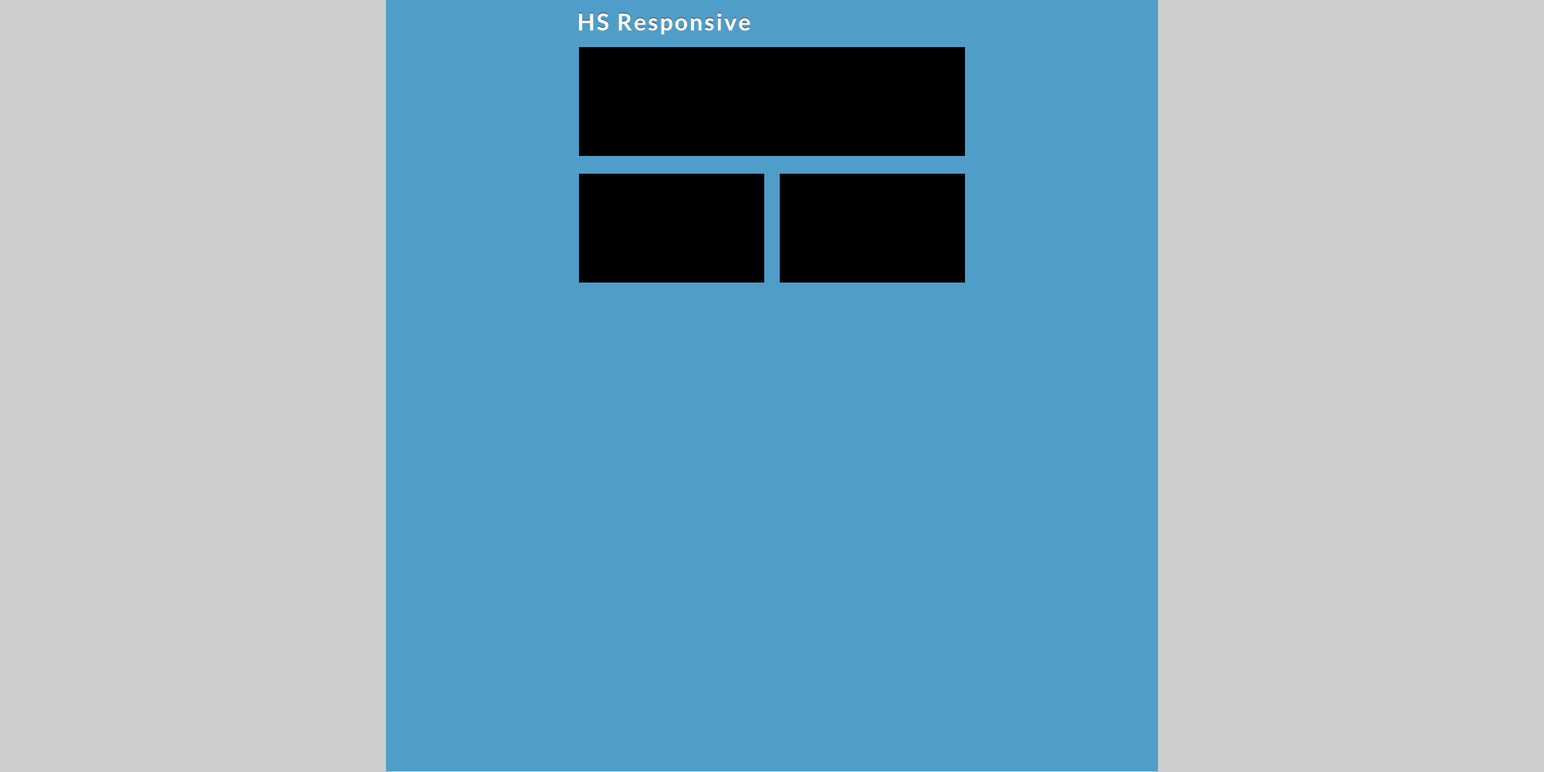
<style>
.page{position:relative;width:1544px;height:772px;background:#cdcdcd}
.page>*{position:absolute;margin:0}
.t1{font:23.1px "Lato-Bold";letter-spacing:0.075em;color:#ffffff}
</style>
<div class="page">
<p class="t1" style="left:579px;top:12px;width:172px;height:22px">HS Responsive</p>
</div>
